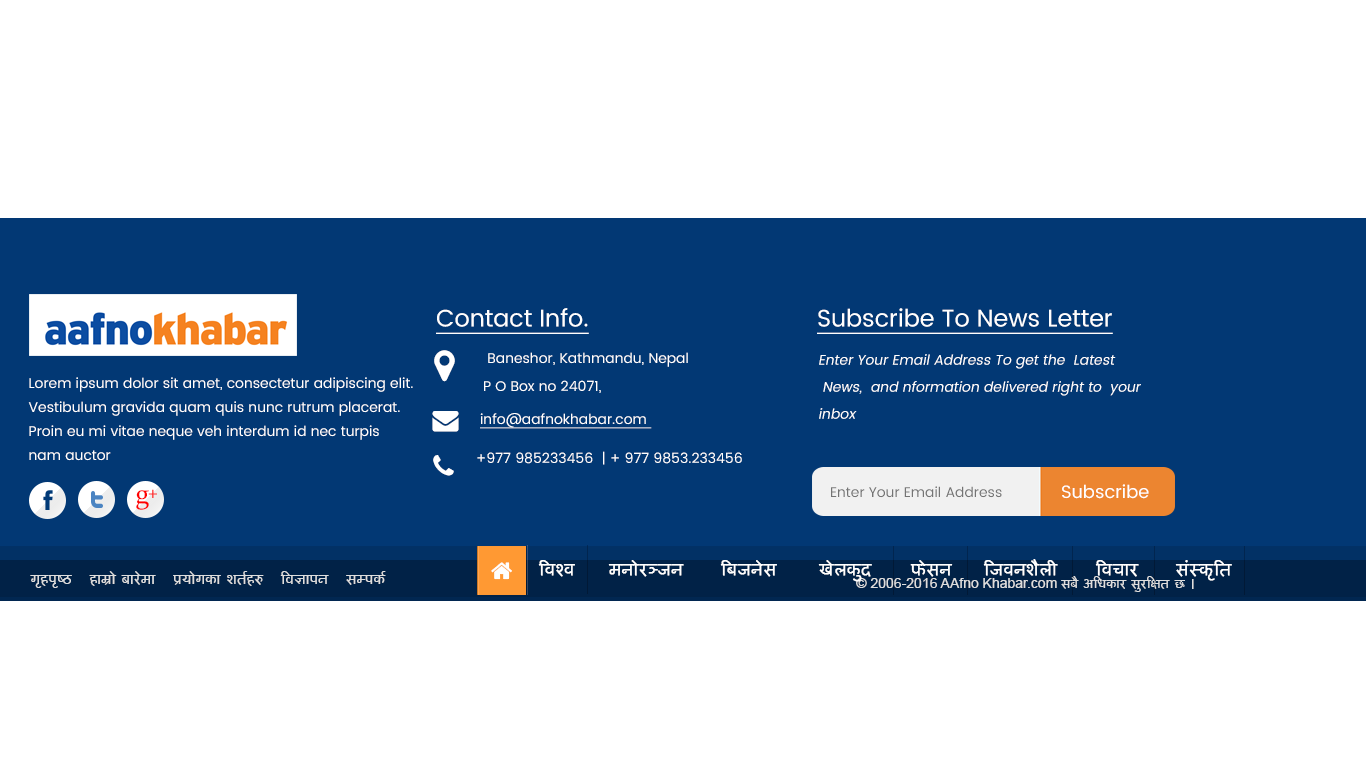
<style>
.page{position:relative;width:1366px;height:768px;background:#ffffff}
.page>*{position:absolute;margin:0}
.t1{font:23.9px "Poppins-Regular";color:#ffffff;text-decoration:underline}
.t2{font:14px/28px "Poppins-Regular";color:#ffffff}
.t3{font:14px/27px "Poppins-Regular";color:#ffffff;font-style:italic}
.t4{font:14px/24px "Poppins-Regular";color:#ffffff}
.t5{font:14px "Poppins-Regular";color:#ffffff;text-decoration:underline}
.t6{font:14px "Poppins-Regular";color:#fefefe}
.t7{font:14px "Poppins-Regular";color:#747474}
.t8{font:18px "Poppins-Regular";color:#ffffff}
.t9{font:27.6px "Constantia";letter-spacing:0.03em;color:#ff0000}
.t10{font:17.9px "Constantia";letter-spacing:0.03em}
.t11{font:21px "Ananda";color:#ffffff;font-weight:bold}
.t12{font:18px "Ananda0Md";color:#dedede}
.t13{font:14px "ArialMT";color:#dedede}
.t14{font:16px "Ananda0Md";color:#dedede}
</style>
<div class="page">
<p class="t1" style="left:436px;top:308px;width:153px;height:26px">Contact Info.</p>
<p class="t1" style="left:817px;top:308px;width:296px;height:26px">Subscribe To News Letter</p>
<p class="t2" style="left:484px;top:352px;width:204px;height:41px">Baneshor, Kathmandu, Nepal <br>P O Box no 24071,</p>
<p class="t3" style="left:819px;top:354px;width:322px;height:65px">Enter Your Email Address To get the  Latest<br> News,  and nformation delivered right to  your inbox</p>
<p class="t4" style="left:28px;top:377px;width:385px;height:84px">Lorem ipsum dolor sit amet, consectetur adipiscing elit.<br>Vestibulum gravida quam quis nunc rutrum placerat. Proin eu mi vitae neque veh interdum id nec turpis nam auctor<br>faucibus sollicitudin.</p>
<p class="t5" style="left:480px;top:413px;width:172px;height:16px">info@aafnokhabar.com</p>
<p class="t6" style="left:477px;top:451px;width:265px;height:14px">+977 985233456  | + 977 9853.233456</p>
<p class="t7" style="left:831px;top:486px;width:171px;height:12px">Enter Your Email Address</p>
<p class="t8" style="left:1062px;top:484px;width:87px;height:15px">Subscribe</p>
<p class="t9" style="left:136px;top:490px;width:13px;height:20px">g</p>
<p class="t10" style="left:148px;top:489px;width:9px;height:9px">+</p>
<p class="t11" style="left:538px;top:560px;width:37px;height:17px">ljZj</p>
<p class="t11" style="left:608px;top:560px;width:76px;height:17px">dgf]/~hg</p>
<p class="t11" style="left:720px;top:560px;width:57px;height:17px">lahg];</p>
<p class="t11" style="left:818px;top:560px;width:54px;height:22px">v]ns'b</p>
<p class="t11" style="left:910px;top:560px;width:43px;height:17px">km];g</p>
<p class="t11" style="left:983px;top:559px;width:75px;height:17px">lhjgz}nL</p>
<p class="t11" style="left:1095px;top:560px;width:44px;height:17px">ljrf/</p>
<p class="t11" style="left:1175px;top:560px;width:57px;height:21px">;+:s[lt</p>
<p class="t12" style="left:30px;top:571px;width:356px;height:17px">u[xk[i7   xfd|f] af/]df   k|of]usf zt{x?   lj1fkg   ;Dks{</p>
<p class="t13" style="left:856px;top:576px;width:338px;height:16px">© 2006-2016 AAfno Khabar.com <span class="t14">;a} clwsf/ ;'/lIft 5 .</span></p>
</div>
